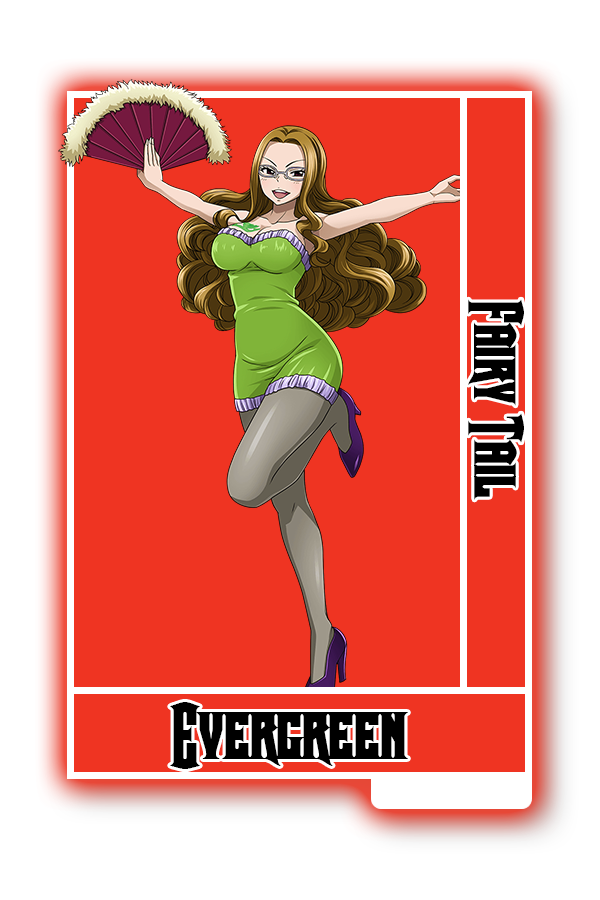
<style>
.page{position:relative;width:600px;height:900px;background:#ef3422}
.page>*{position:absolute;margin:0}
.t1{font:61.5px "Crown-Title";color:#000000}
.t2{font:70.1px "Crown-Title";color:#000000}
</style>
<div class="page">
<p class="t1" style="left:468px;top:299px;width:56px;height:201px;rotate:90deg">Fairy Tail</p>
<p class="t2" style="left:170px;top:702px;width:238px;height:67px">Evergreen</p>
</div>
